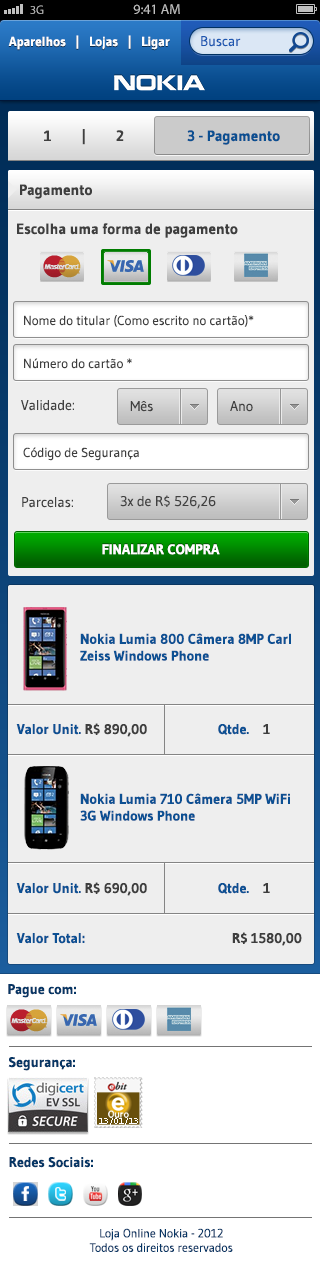
<style>
.page{position:relative;width:320px;height:1263px;background:#eeeeee}
.page>*{position:absolute;margin:0}
.t1{font:12.3px "MyriadPro-Regular";color:#bfbfbf}
.t2{font:14px "MyriadPro-Regular";color:#bfbfbf}
.t3{font:13px "Gudea-Bold";color:#ffffff}
.t4{font:14px "Gudea";color:#1e58b1}
.t5{font:15px "Gudea-Bold";color:#404040}
.t6{font:15px "Gudea-Bold";color:#0b4f91}
.t7{font:15px "Gudea-Bold";color:#3e3e3e}
.t8{font:13px "Gudea";color:#3e3e3e}
.t9{font:14px "Gudea";color:#404040}
.t10{font:14px "Gudea-Bold";color:#ffffff;text-transform:uppercase}
.t11{font:14px "Gudea-Bold";color:#0c5093}
.t12{font:14px "Gudea-Bold";color:#3e3e3e}
.t13{font:14px "Gudea-Bold";color:#063665}
.t14{font:12px "Gudea";color:#063665}
</style>
<div class="page">
<p class="t1" style="left:30px;top:5px;width:14px;height:9px">3G</p>
<p class="t2" style="left:133px;top:4px;width:47px;height:10px">9:41 AM</p>
<p class="t3" style="left:8px;top:35px;width:162px;height:15px">Aparelhos   |   Lojas   |   Ligar</p>
<p class="t4" style="left:201px;top:36px;width:40px;height:11px">Buscar</p>
<p class="t5" style="left:44px;top:129px;width:80px;height:16px">1        |        2</p>
<p class="t6" style="left:187px;top:130px;width:93px;height:15px">3 - Pagamento</p>
<p class="t7" style="left:20px;top:184px;width:72px;height:15px">Pagamento</p>
<p class="t7" style="left:17px;top:223px;width:221px;height:15px">Escolha uma forma de pagamento</p>
<p class="t8" style="left:24px;top:315px;width:230px;height:12px">Nome do titular (Como escrito no cartão)*</p>
<p class="t8" style="left:24px;top:358px;width:108px;height:11px">Número do cartão *</p>
<p class="t9" style="left:21px;top:400px;width:53px;height:11px">Validade:</p>
<p class="t9" style="left:130px;top:401px;width:23px;height:11px">Mês</p>
<p class="t9" style="left:230px;top:401px;width:23px;height:11px">Ano</p>
<p class="t8" style="left:23px;top:447px;width:116px;height:14px">Código de Segurança</p>
<p class="t9" style="left:22px;top:497px;width:51px;height:11px">Parcelas:</p>
<p class="t9" style="left:120px;top:495px;width:96px;height:14px">3x de R$ 526,26</p>
<p class="t10" style="left:102px;top:544px;width:118px;height:11px">Finalizar compra</p>
<p class="t11" style="left:80px;top:633px;width:211px;height:28px">Nokia Lumia 800 Câmera 8MP Carl Zeiss Windows Phone</p>
<p class="t11" style="left:16px;top:723px;width:131px;height:14px">Valor Unit. <span class="t12">R$ 890,00</span></p>
<p class="t11" style="left:218px;top:724px;width:52px;height:11px">Qtde.    <span class="t12">1</span></p>
<p class="t11" style="left:80px;top:793px;width:210px;height:28px">Nokia Lumia 710 Câmera 5MP WiFi 3G Windows Phone</p>
<p class="t11" style="left:16px;top:882px;width:131px;height:14px">Valor Unit. <span class="t12">R$ 690,00</span></p>
<p class="t11" style="left:218px;top:883px;width:52px;height:11px">Qtde.    <span class="t12">1</span></p>
<p class="t11" style="left:16px;top:932px;width:286px;height:14px">Valor Total:                                          <span class="t12">R$ 1580,00</span></p>
<p class="t13" style="left:8px;top:984px;width:68px;height:14px">Pague com:</p>
<p class="t13" style="left:8px;top:1057px;width:67px;height:14px">Segurança:</p>
<p class="t13" style="left:9px;top:1157px;width:84px;height:11px">Redes Sociais:</p>
<p class="t14" style="left:89px;top:1228px;width:144px;height:24px;text-align:center">Loja Online Nokia - 2012<br>Todos os direitos reservados</p>
</div>
